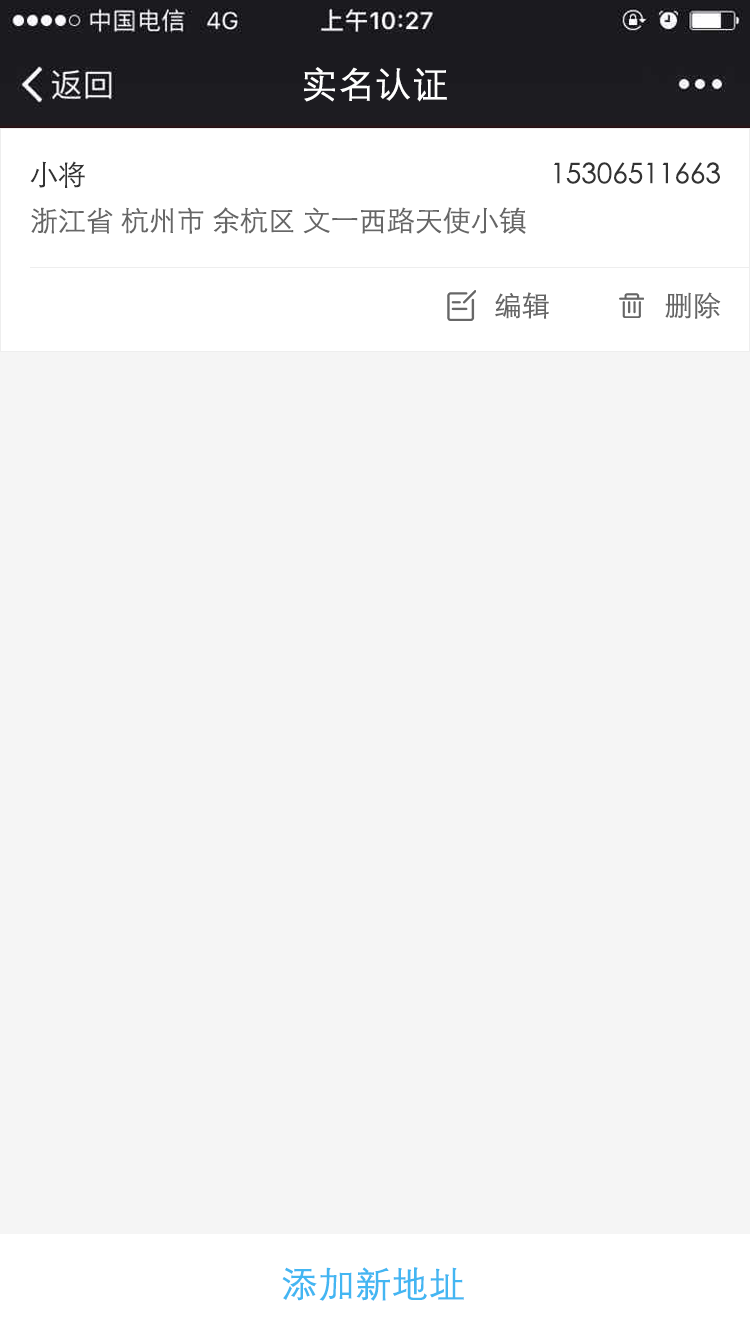
<style>
.page{position:relative;width:750px;height:1334px;background:#f5f5f5}
.page>*{position:absolute;margin:0}
.t1{font:36px "FZZDXJW--GB1-0";color:#ffffff;font-weight:bold}
.t2{font:28px "STXihei";color:#333333}
.t3{font:28px "STXihei";color:#666666}
.t4{font:36px "FZZDXJW--GB1-0";color:#43b6f2;font-weight:bold}
</style>
<div class="page">
<p class="t1" style="left:304px;top:67px;width:143px;height:35px">实名认证</p>
<p class="t2" style="left:30px;top:161px;width:55px;height:27px">小将</p>
<p class="t2" style="left:554px;top:162px;width:166px;height:22px">15306511663</p>
<p class="t3" style="left:31px;top:207px;width:495px;height:27px">浙江省 杭州市 余杭区 文一西路天使小镇</p>
<p class="t3" style="left:495px;top:292px;width:54px;height:27px">编辑</p>
<p class="t3" style="left:665px;top:292px;width:56px;height:27px">删除</p>
<p class="t4" style="left:282px;top:1267px;width:182px;height:34px">添加新地址</p>
</div>
